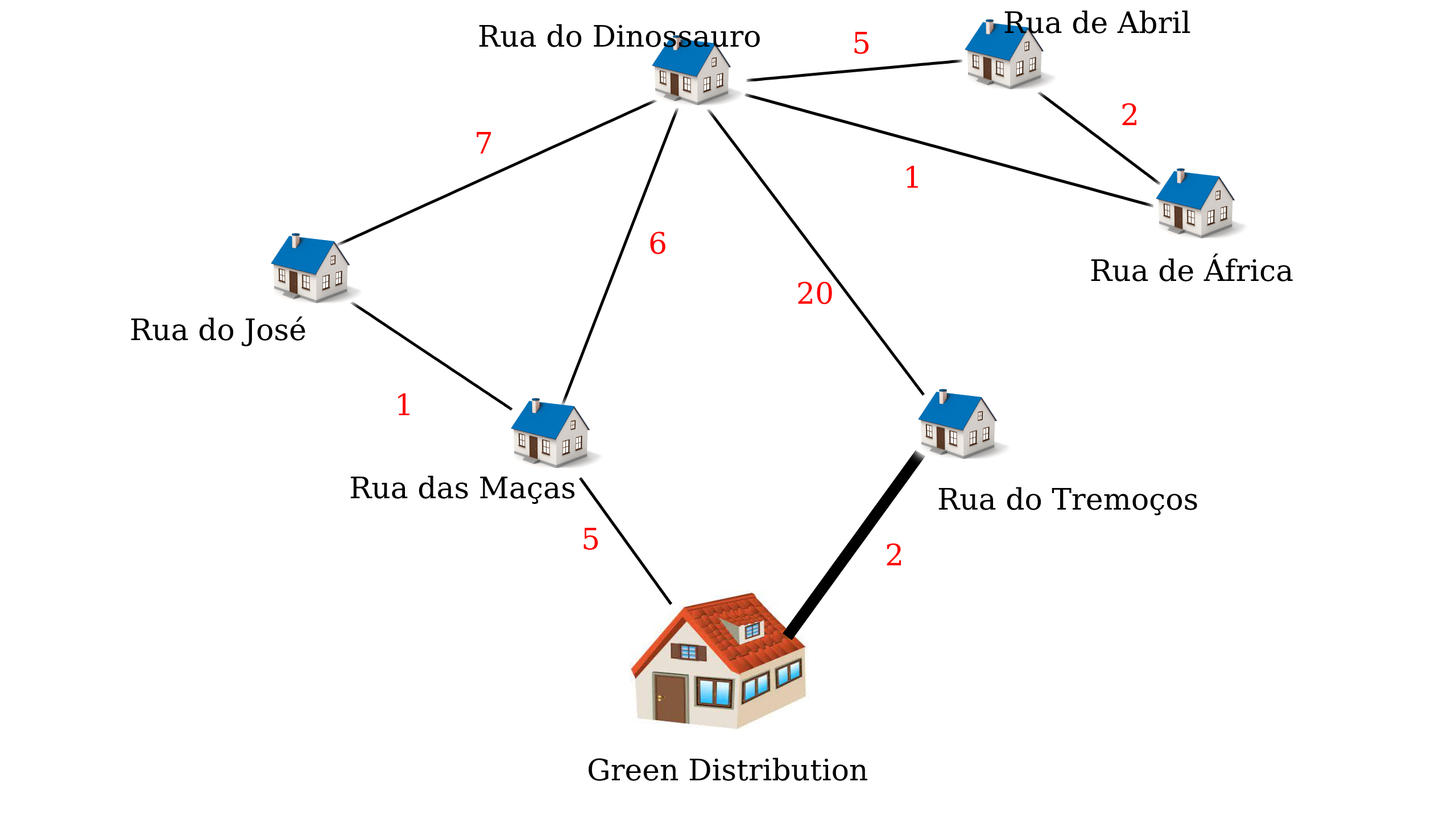
<style>
.page{position:relative;width:1456px;height:819px;background:#ffffff}
.page>*{position:absolute;margin:0}
.t1{font:29.6px "DejaVuSerif";color:#000000}
.t2{font:29.6px "DejaVuSerif";color:#ff0000}
</style>
<div class="page">
<p class="t1" style="left:1004px;top:10px;width:186px;height:24px">Rua de Abril</p>
<p class="t1" style="left:479px;top:24px;width:281px;height:23px">Rua do Dinossauro</p>
<p class="t2" style="left:854px;top:32px;width:15px;height:22px">5</p>
<p class="t2" style="left:1122px;top:103px;width:14px;height:22px">2</p>
<p class="t2" style="left:477px;top:132px;width:14px;height:22px">7</p>
<p class="t2" style="left:907px;top:166px;width:11px;height:22px">1</p>
<p class="t2" style="left:650px;top:231px;width:15px;height:23px">6</p>
<p class="t1" style="left:1091px;top:253px;width:202px;height:29px">Rua de África</p>
<p class="t2" style="left:798px;top:282px;width:34px;height:22px">20</p>
<p class="t1" style="left:131px;top:316px;width:174px;height:30px">Rua do José</p>
<p class="t2" style="left:398px;top:393px;width:11px;height:22px">1</p>
<p class="t1" style="left:350px;top:475px;width:225px;height:29px">Rua das Maças</p>
<p class="t1" style="left:938px;top:487px;width:259px;height:29px">Rua do Tremoços</p>
<p class="t2" style="left:584px;top:528px;width:14px;height:22px">5</p>
<p class="t2" style="left:887px;top:543px;width:14px;height:22px">2</p>
<p class="t1" style="left:588px;top:758px;width:280px;height:23px">Green Distribution</p>
</div>
